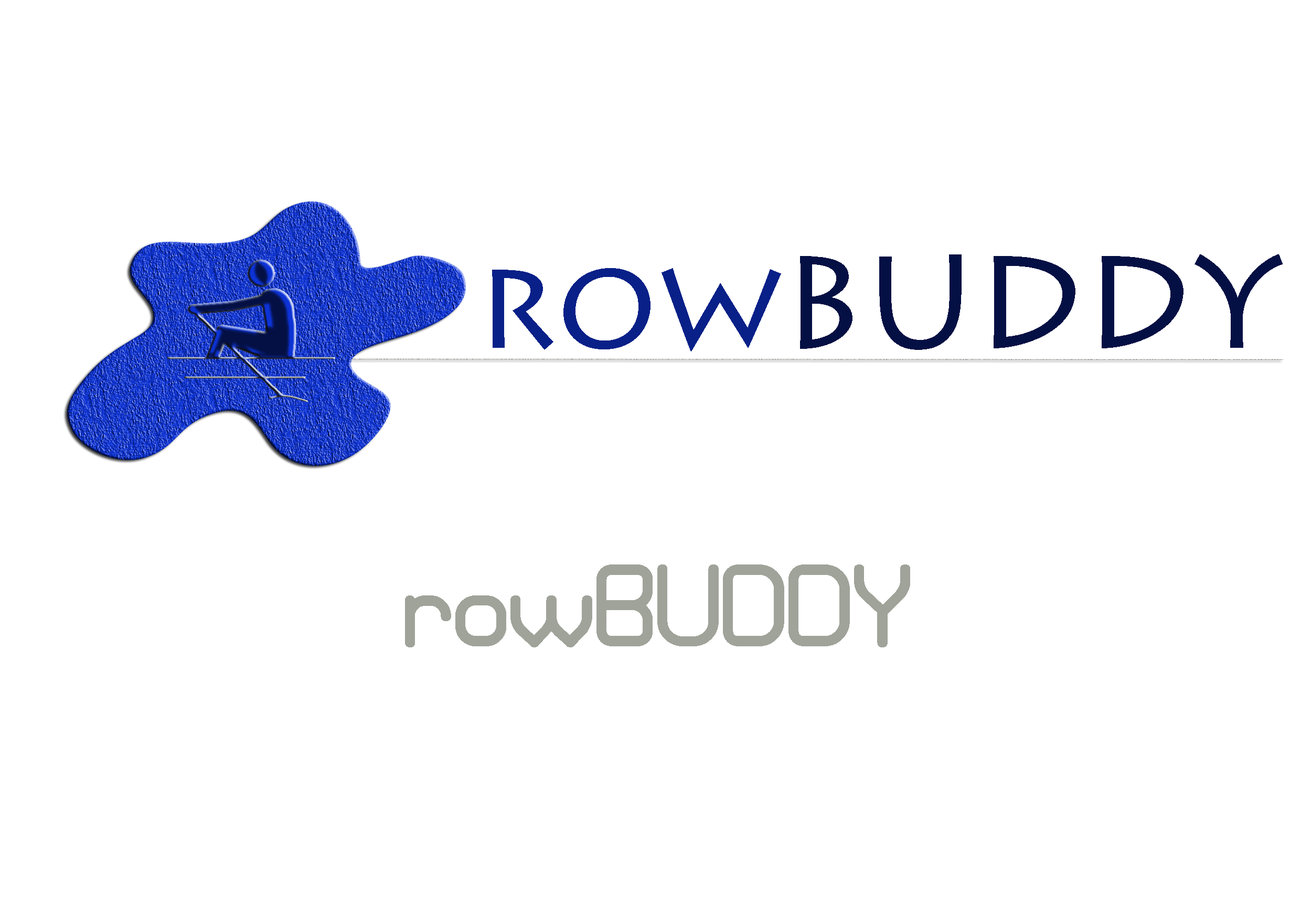
<style>
.page{position:relative;width:1301px;height:917px;background:#ffffff}
.page>*{position:absolute;margin:0}
.t1{font:131.1px "BraveNewEraG98";color:#9fa399}
</style>
<div class="page">
<p class="t1" style="left:405px;top:564px;width:505px;height:83px">rowBUDDY</p>
</div>
